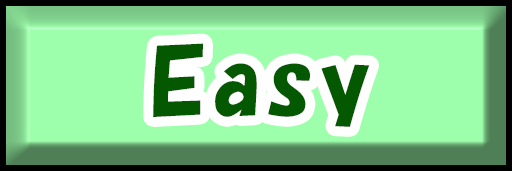
<style>
.page{position:relative;width:512px;height:171px;background:#9dffac}
.page>*{position:absolute;margin:0}
.t1{font:90px "HGPSoeiKakupoptai";letter-spacing:0.08em;color:#045800}
</style>
<div class="page">
<p class="t1" style="left:153px;top:43px;width:217px;height:84px">Easy</p>
</div>
